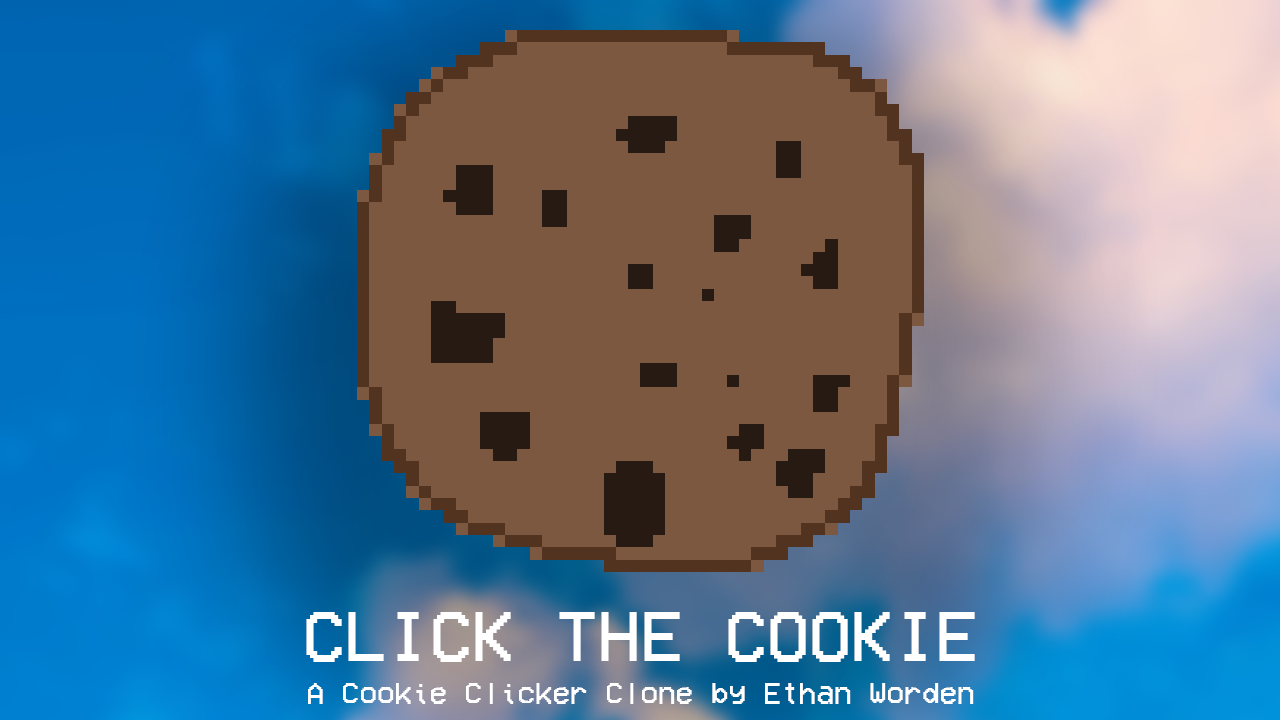
<style>
.page{position:relative;width:1280px;height:720px;background:#7d5841}
.page>*{position:absolute;margin:0}
.t1{font:72px "VCROSDMono";color:#ffffff}
.t2{font:30px "VCROSDMono";color:#ffffff}
</style>
<div class="page">
<p class="t1" style="left:306px;top:612px;width:669px;height:50px">CLICK THE COOKIE</p>
<p class="t2" style="left:308px;top:683px;width:666px;height:21px">A Cookie Clicker Clone by Ethan Worden</p>
</div>
